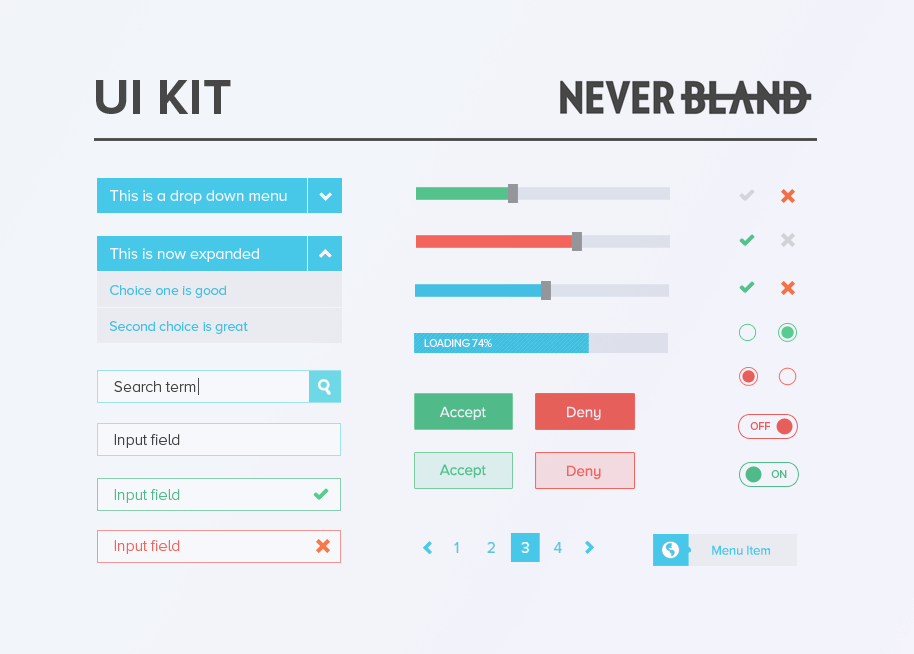
<style>
.page{position:relative;width:914px;height:654px;background:#f2f5fa}
.page>*{position:absolute;margin:0}
.t1{font:49.6px "ProximaNova-Bold";letter-spacing:0.01em;color:#474747}
.t2{font:16px "ProximaNovaA-Regular";letter-spacing:-0.01em;color:#ffffff}
.t3{font:11px "ProximaNovaA-Regular";letter-spacing:-0.01em;color:#ffffff;text-transform:uppercase}
.t4{font:16px "ProximaNovaA-Light";letter-spacing:-0.01em;color:#434343}
.t5{font:15.2px "ProximaNovaA-Regular";letter-spacing:-0.01em;color:#f7f8fb}
.t6{font:11px "ProximaNovaA-Regular";letter-spacing:-0.01em;color:#e65f5a}
.t7{font:15.2px "ProximaNovaA-Regular";letter-spacing:-0.01em;color:#58cb8e}
.t8{font:15.2px "ProximaNovaA-Regular";letter-spacing:-0.01em;color:#ff695e}
.t9{font:11px "ProximaNovaA-Regular";letter-spacing:-0.01em;color:#50ba88}
.t10{font:16px "ProximaNovaA-Light";letter-spacing:-0.01em;color:#50ba88}
.t11{font:16px "ProximaNovaA-Light";letter-spacing:-0.01em;color:#f2645c}
.t12{font:13.1px "ProximaNovaA-Regular";letter-spacing:-0.01em;color:#47c8e8}
</style>
<div class="page">
<p class="t1" style="left:96px;top:80px;width:135px;height:34px">UI KIT</p>
<p class="t2" style="left:110px;top:190px;width:177px;height:14px">This is a drop down menu</p>
<p class="t3" style="left:424px;top:339px;width:68px;height:8px">Loading 74%</p>
<p class="t4" style="left:114px;top:381px;width:82px;height:11px">Search term</p>
<p class="t5" style="left:439px;top:406px;width:47px;height:14px">Accept</p>
<p class="t5" style="left:567px;top:406px;width:34px;height:15px">Deny</p>
<p class="t6" style="left:750px;top:422px;width:21px;height:8px">OFF</p>
<p class="t4" style="left:114px;top:434px;width:66px;height:14px">Input field</p>
<p class="t7" style="left:439px;top:464px;width:47px;height:14px">Accept</p>
<p class="t8" style="left:567px;top:465px;width:34px;height:14px">Deny</p>
<p class="t9" style="left:771px;top:470px;width:16px;height:8px">ON</p>
<p class="t10" style="left:114px;top:489px;width:66px;height:14px">Input field</p>
<p class="t11" style="left:114px;top:540px;width:66px;height:14px">Input field</p>
<p class="t12" style="left:712px;top:545px;width:58px;height:10px">Menu Item</p>
</div>
